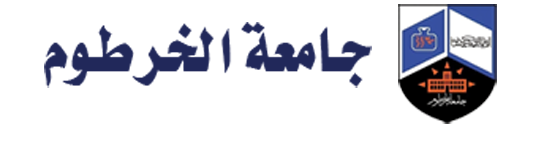
<style>
.page{position:relative;width:544px;height:160px;background:#ffffff}
.page>*{position:absolute;margin:0}
.t1{font:75.1px "";color:#21285a}
</style>
<div class="page">
<p class="t1" style="left:44px;top:22px;width:328px;height:66px">جامعة الخرطوم</p>
</div>
